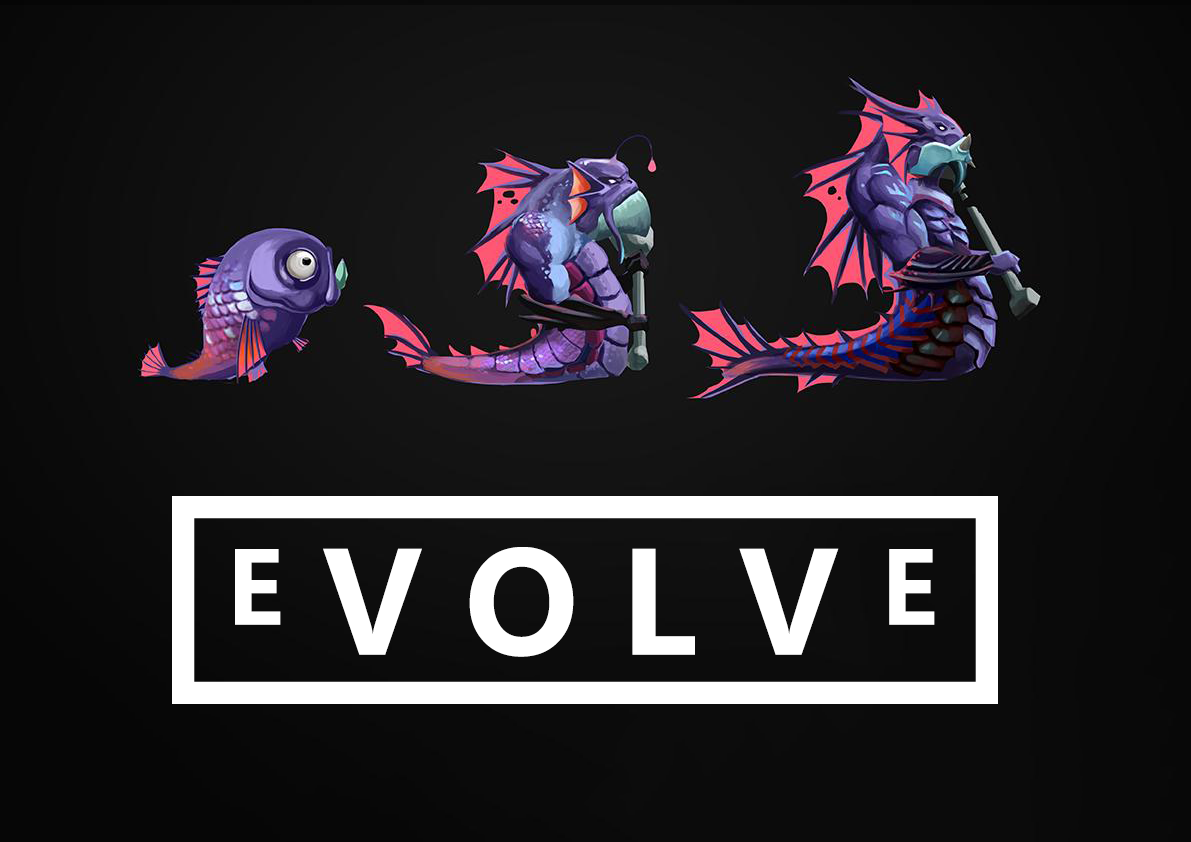
<style>
.page{position:relative;width:1191px;height:842px}
.page>*{position:absolute;margin:0}
.t1{font:140px "MicrosoftYaHei-Bold";color:#ffffff}
.t2{font:100px "MicrosoftYaHei-Bold";color:#ffffff}
</style>
<div class="page">
<p class="t1" style="left:235px;top:547px;width:700px;height:110px"><span class="t2">E </span>V O L V <span class="t2">E</span></p>
</div>
